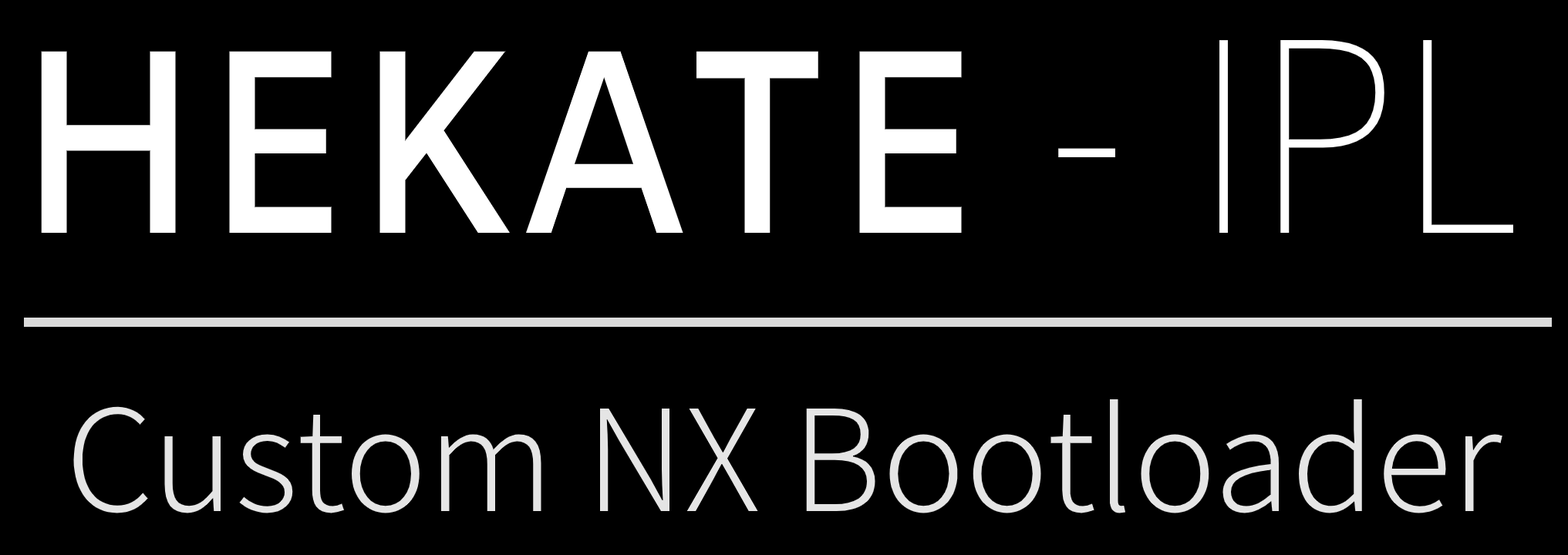
<style>
.page{position:relative;width:1568px;height:555px;background:#000000}
.page>*{position:absolute;margin:0}
.t1{font:260.8px "Amiko-SemiBold";color:#ffffff;scale:0.9 1}
.t2{font:292px "Assistant-ExtraLight";color:#ffffff;scale:0.9 1}
.t3{font:155.6px "Assistant-Light";color:#e5e5e5}
</style>
<div class="page">
<p class="t1" style="left:41px;top:40px;width:1473px;height:194px">HEKATE     <span class="t2">IPL</span></p>
<p class="t2" style="left:1058px;top:148px;width:57px;height:9px">-</p>
<p class="t3" style="left:73px;top:400px;width:1429px;height:114px">Custom NX Bootloader</p>
</div>
